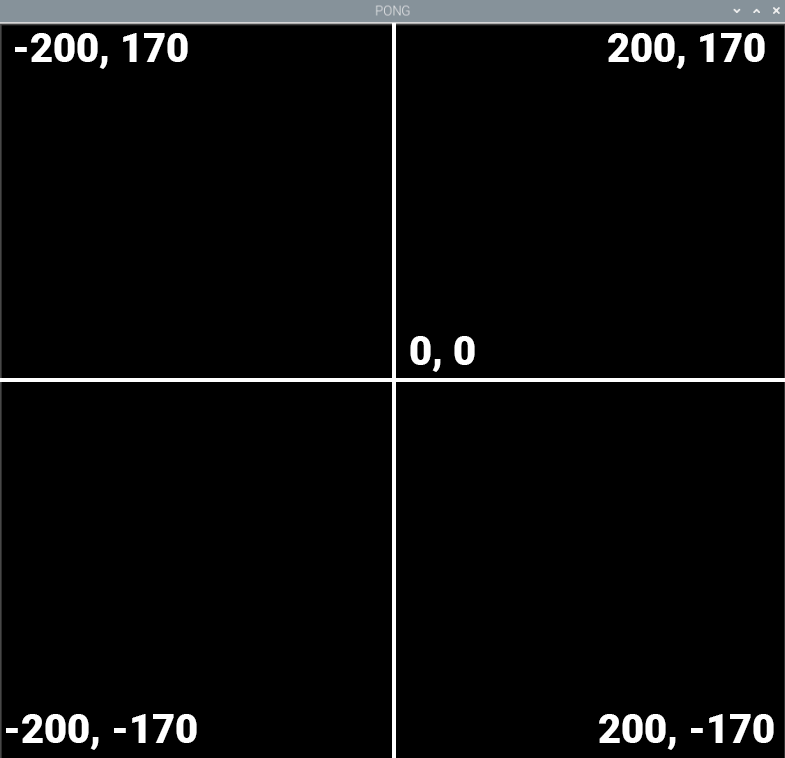
<style>
.page{position:relative;width:785px;height:758px;background:#000000}
.page>*{position:absolute;margin:0}
.t1{font:40px "Roboto-Black";color:#ffffff}
</style>
<div class="page">
<p class="t1" style="left:15px;top:33px;width:173px;height:36px">-200, 170</p>
<p class="t1" style="left:608px;top:33px;width:157px;height:36px">200, 170</p>
<p class="t1" style="left:410px;top:336px;width:65px;height:36px">0, 0</p>
<p class="t1" style="left:6px;top:714px;width:191px;height:36px">-200, -170</p>
<p class="t1" style="left:599px;top:714px;width:175px;height:36px">200, -170</p>
</div>
